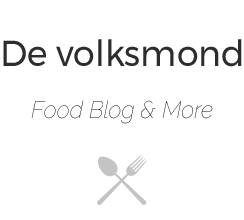
<style>
.page{position:relative;width:244px;height:220px;background:#ffffff}
.page>*{position:absolute;margin:0}
.t1{font:36px "Montserrat-Regular";color:#2d2d2d;scale:0.96 1}
.t2{font:24px "FFFForward";color:#2d2d2d;scale:0.96 1}
.t3{font:24px "Raleway-ThinItalic";scale:0.96 1}
.t4{font:24px "FFFForward";scale:0.96 1}
</style>
<div class="page">
<p class="t1" style="left:3px;top:39px;width:239px;height:28px"><span class="t2"><br><br><br></span>De volksmond</p>
<p class="t3" style="left:31px;top:100px;width:182px;height:24px"><span class="t4"><br><br><br></span>Food Blog &amp; More</p>
</div>
